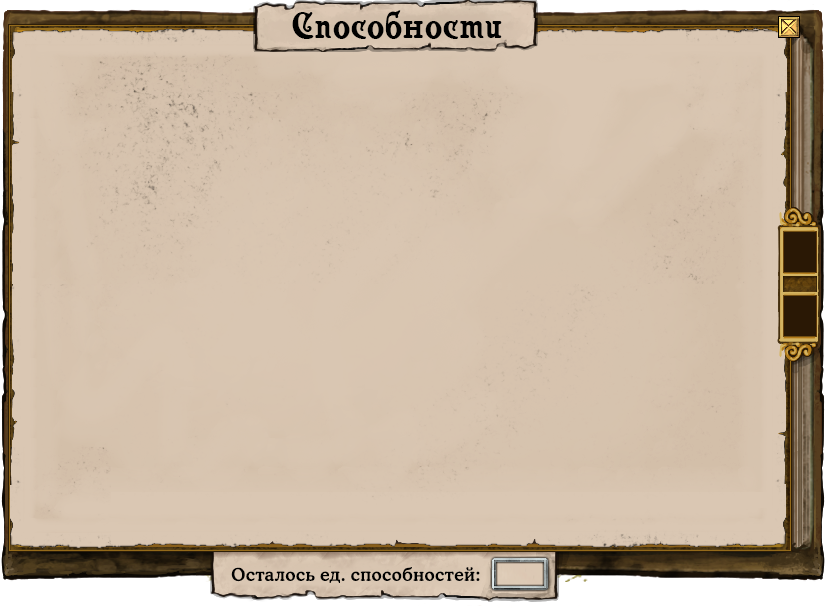
<style>
.page{position:relative;width:832px;height:608px}
.page>*{position:absolute;margin:0}
.t1{font:36px "Casanova";letter-spacing:0.03em;color:#000000}
.t2{font:17.4px "CooperMediumCBT";letter-spacing:0.03em;color:#000000}
</style>
<div class="page">
<p class="t1" style="left:292px;top:10px;width:210px;height:29px">Способности</p>
<p class="t2" style="left:231px;top:567px;width:249px;height:16px">Осталось ед. способностей:</p>
</div>
